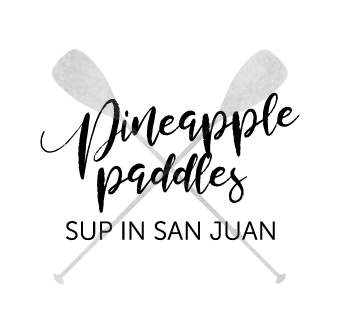
<style>
.page{position:relative;width:340px;height:321px;background:#ffffff}
.page>*{position:absolute;margin:0}
.t1{font:87px "Valledofasjustpersonalonly";color:#000000}
.t2{font:25.8px "MuseoSans-300";color:#000000}
</style>
<div class="page">
<p class="t1" style="left:40px;top:92px;width:260px;height:88px;rotate:-4deg">Pineapple</p>
<p class="t1" style="left:97px;top:152px;width:150px;height:61px">paddles</p>
<p class="t2" style="left:66px;top:221px;width:209px;height:20px">SUP IN SAN JUAN</p>
</div>
